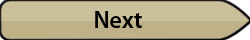
<style>
.page{position:relative;width:250px;height:40px;background:#cbc09c}
.page>*{position:absolute;margin:0}
.t1{font:24px "MyriadPro-Semibold";color:#000000}
</style>
<div class="page">
<p class="t1" style="left:95px;top:11px;width:47px;height:17px">Next</p>
</div>
